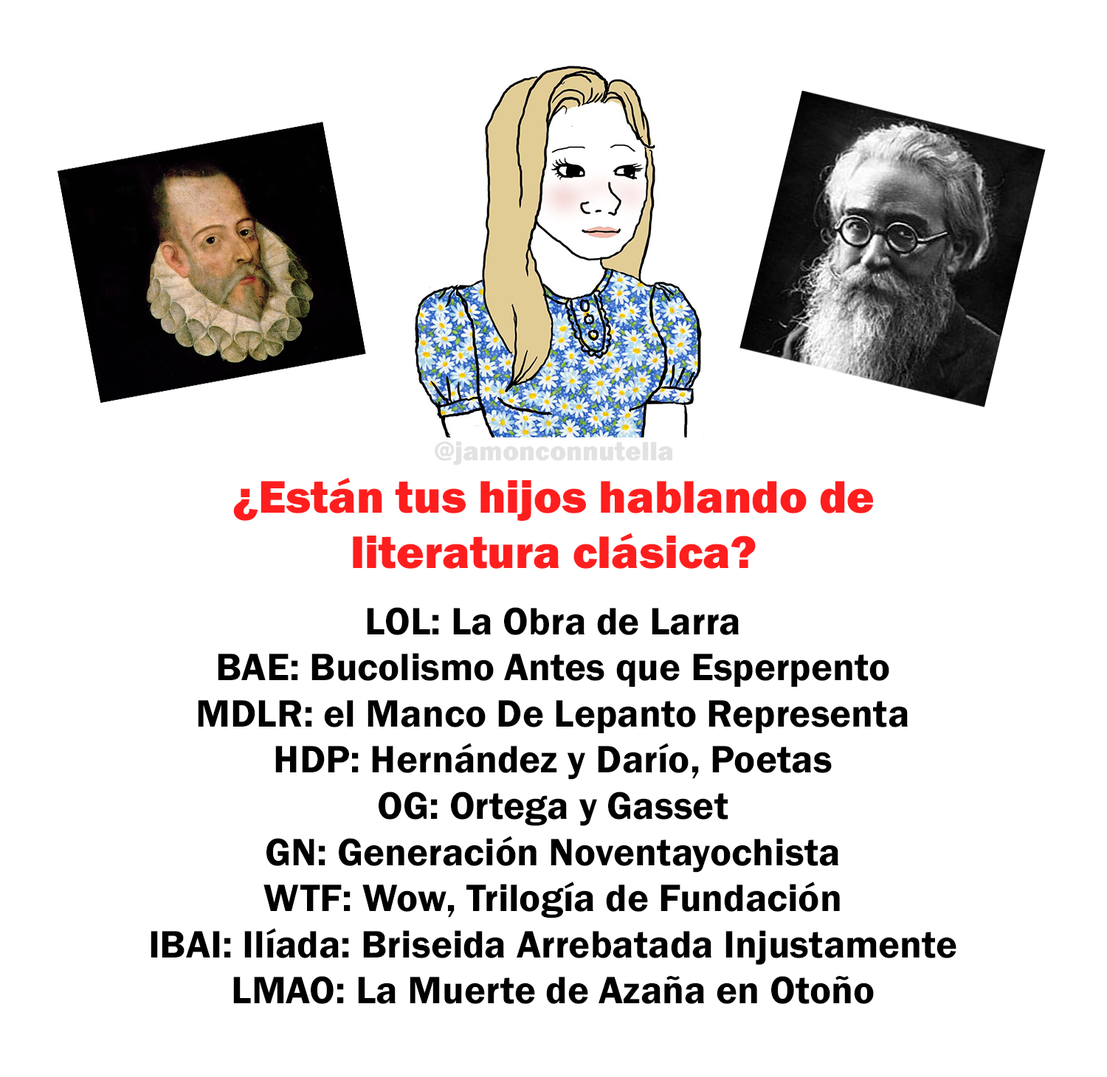
<style>
.page{position:relative;width:1107px;height:1077px;background:#ffffff}
.page>*{position:absolute;margin:0}
.t1{font:27.6px "FranklinGothic-Heavy";color:#e2e2e2}
.t2{font:47.2px "FranklinGothic-Heavy";color:#fe1e1e}
.t3{font:39.6px "FranklinGothic-Demi";color:#000000}
</style>
<div class="page">
<p class="t1" style="left:435px;top:441px;width:238px;height:25px">@jamonconnutella</p>
<p class="t2" style="left:233px;top:477px;width:640px;height:92px;text-align:center">¿Están tus hijos hablando de<br>literatura clásica?</p>
<p class="t3" style="left:151px;top:607px;width:805px;height:397px;text-align:center">LOL: La Obra de Larra<br>BAE: Bucolismo Antes que Esperpento<br>MDLR: el Manco De Lepanto Representa<br>HDP: Hernández y Darío, Poetas<br>OG: Ortega y Gasset<br>GN: Generación Noventayochista<br>WTF: Wow, Trilogía de Fundación<br>IBAI: Ilíada: Briseida Arrebatada Injustamente<br>LMAO: La Muerte de Azaña en Otoño</p>
</div>
